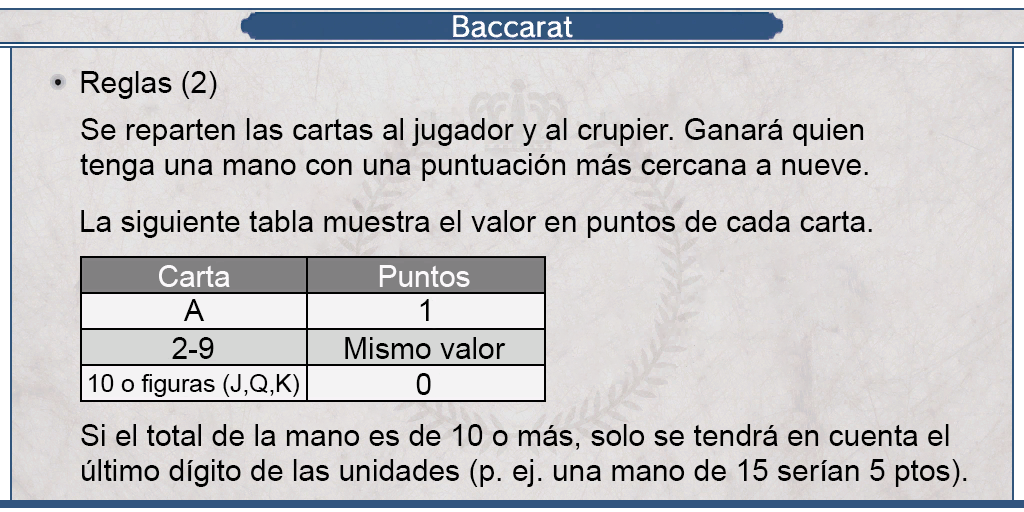
<style>
.page{position:relative;width:1024px;height:512px}
.page>*{position:absolute;margin:0}
.t1{font:29.9px "ArialMT";color:#000000}
.t2{font:29.9px "ArialMT";color:#fbf9fb}
.t3{font:24.8px "ArialMT";color:#000000}
</style>
<div class="page">
<p class="t1" style="left:81px;top:71px;width:136px;height:28px">Reglas (2)</p>
<p class="t1" style="left:80px;top:118px;width:788px;height:63px;text-align:justify">Se reparten las cartas al jugador y al crupier. Ganará quien <br>tenga una mano con una puntuación más cercana a nueve.</p>
<p class="t1" style="left:81px;top:210px;width:791px;height:28px">La siguiente tabla muestra el valor en puntos de cada carta.</p>
<p class="t2" style="left:159px;top:265px;width:71px;height:22px">Carta</p>
<p class="t2" style="left:379px;top:265px;width:91px;height:22px">Puntos</p>
<p class="t1" style="left:183px;top:299px;width:22px;height:22px">A</p>
<p class="t1" style="left:420px;top:299px;width:9px;height:22px">1</p>
<p class="t1" style="left:172px;top:337px;width:42px;height:22px">2-9</p>
<p class="t1" style="left:345px;top:337px;width:161px;height:22px">Mismo valor</p>
<p class="t3" style="left:89px;top:374px;width:210px;height:23px">10 o figuras (J,Q,K)</p>
<p class="t1" style="left:416px;top:373px;width:15px;height:22px">0</p>
<p class="t1" style="left:81px;top:424px;width:886px;height:63px;text-align:justify">Si el total de la mano es de 10 o más, solo se tendrá en cuenta el <br>último dígito de las unidades (p. ej. una mano de 15 serían 5 ptos).</p>
</div>
